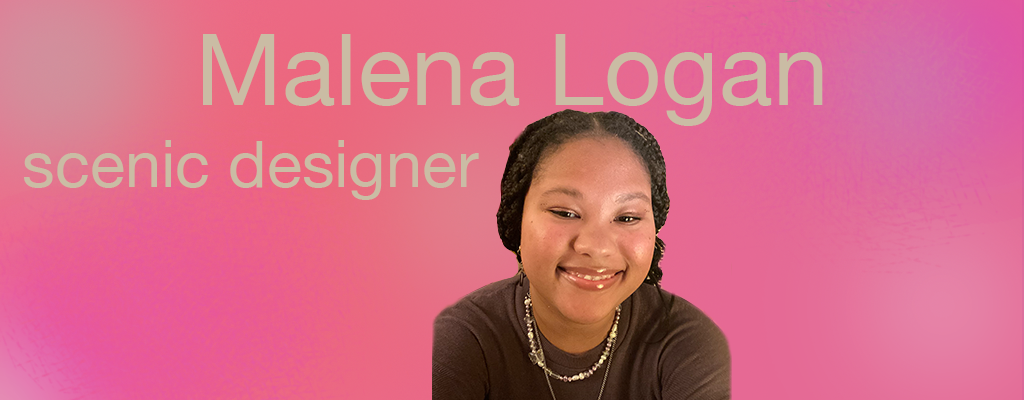
<style>
.page{position:relative;width:1024px;height:400px}
.page>*{position:absolute;margin:0}
.t1{font:100px "HelveticaNeue";color:#cabca4}
.t2{font:65px "HelveticaNeue";color:#cabca4}
</style>
<div class="page">
<p class="t1" style="left:203px;top:34px;width:620px;height:92px">Malena Logan</p>
<p class="t2" style="left:24px;top:140px;width:455px;height:60px">scenic designer</p>
</div>
